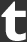
<style>
.page{position:relative;width:27px;height:42px;background:#333333}
.page>*{position:absolute;margin:0}
.t1{font:64px "GillSansMT-Bold";color:#ffffff}
</style>
<div class="page">
<p class="t1" style="left:1px;top:1px;width:25px;height:40px">t</p>
</div>
